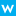
<style>
.page{position:relative;width:16px;height:16px;background:#00aeef}
.page>*{position:absolute;margin:0}
.t1{font:19.5px "NeutraText-Demi";letter-spacing:0.05em;color:#ffffff}
</style>
<div class="page">
<p class="t1" style="left:1px;top:4px;width:13px;height:10px">w</p>
</div>
